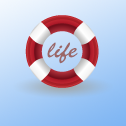
<style>
.page{position:relative;width:126px;height:126px}
.page>*{position:absolute;margin:0}
.t1{font:24px "BrushScriptStd";color:#9b6767}
</style>
<div class="page">
<p class="t1" style="left:47px;top:42px;width:31px;height:22px">life</p>
</div>
